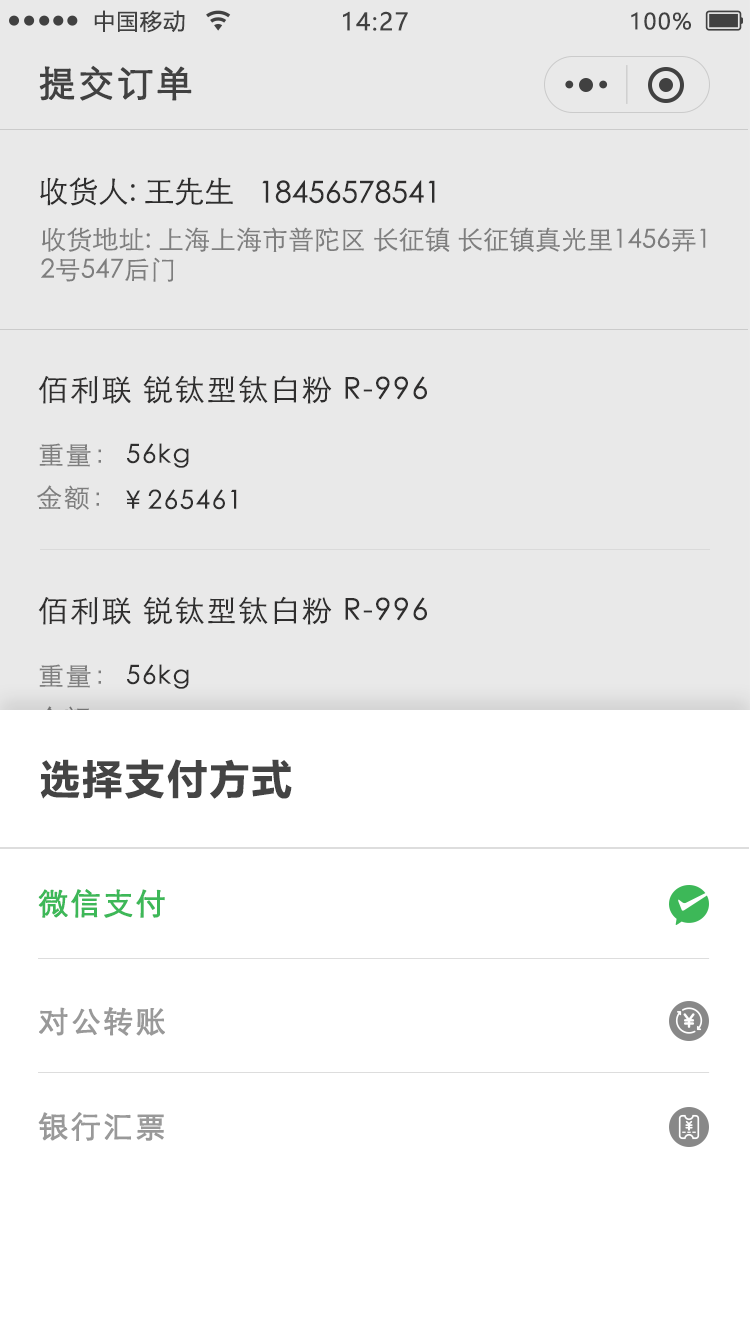
<style>
.page{position:relative;width:750px;height:1334px;background:#e9e9e9}
.page>*{position:absolute;margin:0}
.t1{font:22px "MicrosoftYaHei";letter-spacing:0.06em;color:#444444}
.t2{font:24px "MicrosoftYaHei";letter-spacing:0.06em;color:#444444}
.t3{font:36px "STXihei";letter-spacing:0.06em;color:#444444;font-weight:bold}
.t4{font:30px "STXihei";color:#302f2f}
.t5{font:26px/30px "STXihei";color:#888888}
.t6{font:30px "STXihei";letter-spacing:0.06em;color:#302f2f}
.t7{font:26px "STXihei";letter-spacing:0.06em;color:#888888}
.t8{font:26px "STXihei";letter-spacing:0.06em;color:#302f2f}
.t9{font:40px "MicrosoftYaHei-Bold";letter-spacing:0.06em;color:#444444}
.t10{font:29.9px "STXihei";letter-spacing:0.06em;color:#3db858;font-weight:bold}
.t11{font:29.9px "STXihei";letter-spacing:0.06em;color:#999999;font-weight:bold}
</style>
<div class="page">
<p class="t1" style="left:94px;top:10px;width:91px;height:23px">中国移动</p>
<p class="t2" style="left:343px;top:11px;width:65px;height:20px">14:27</p>
<p class="t1" style="left:631px;top:12px;width:60px;height:18px">100%</p>
<p class="t3" style="left:39px;top:65px;width:153px;height:36px">提交订单</p>
<p class="t4" style="left:40px;top:177px;width:193px;height:29px">收货人: 王先生</p>
<p class="t4" style="left:262px;top:180px;width:173px;height:24px">18456578541</p>
<p class="t5" style="left:41px;top:227px;width:665px;height:55px">收货地址: 上海上海市普陀区 长征镇 长征镇真光里1456弄1<br>2号547后门</p>
<p class="t6" style="left:38px;top:375px;width:389px;height:29px">佰利联 锐钛型钛白粉 R-996</p>
<p class="t7" style="left:39px;top:443px;width:62px;height:24px">重量：</p>
<p class="t8" style="left:127px;top:443px;width:62px;height:25px">56kg</p>
<p class="t7" style="left:37px;top:485px;width:62px;height:25px">金额：</p>
<p class="t8" style="left:126px;top:489px;width:111px;height:21px">￥265461</p>
<p class="t6" style="left:38px;top:596px;width:389px;height:29px">佰利联 锐钛型钛白粉 R-996</p>
<p class="t7" style="left:39px;top:664px;width:62px;height:24px">重量：</p>
<p class="t8" style="left:127px;top:664px;width:62px;height:25px">56kg</p>
<p class="t9" style="left:40px;top:759px;width:252px;height:40px">选择支付方式</p>
<p class="t10" style="left:38px;top:889px;width:127px;height:29px">微信支付</p>
<p class="t11" style="left:39px;top:1007px;width:126px;height:29px">对公转账</p>
<p class="t11" style="left:38px;top:1112px;width:126px;height:29px">银行汇票</p>
</div>
